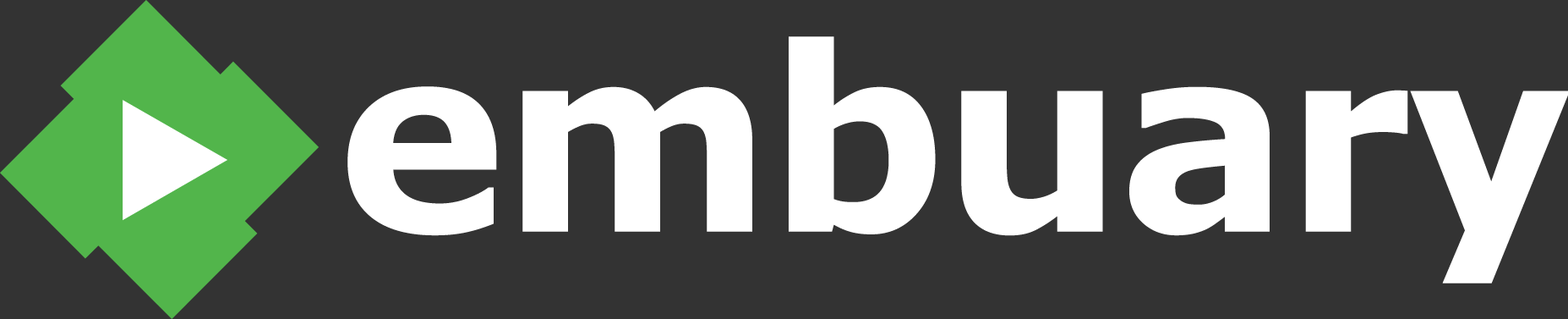
<style>
.page{position:relative;width:1568px;height:319px;background:#333333}
.page>*{position:absolute;margin:0}
.t1{font:256px "Verdana-Bold";letter-spacing:-0.02em;color:#ffffff}
</style>
<div class="page">
<p class="t1" style="left:347px;top:36px;width:1223px;height:247px">embuary</p>
</div>
